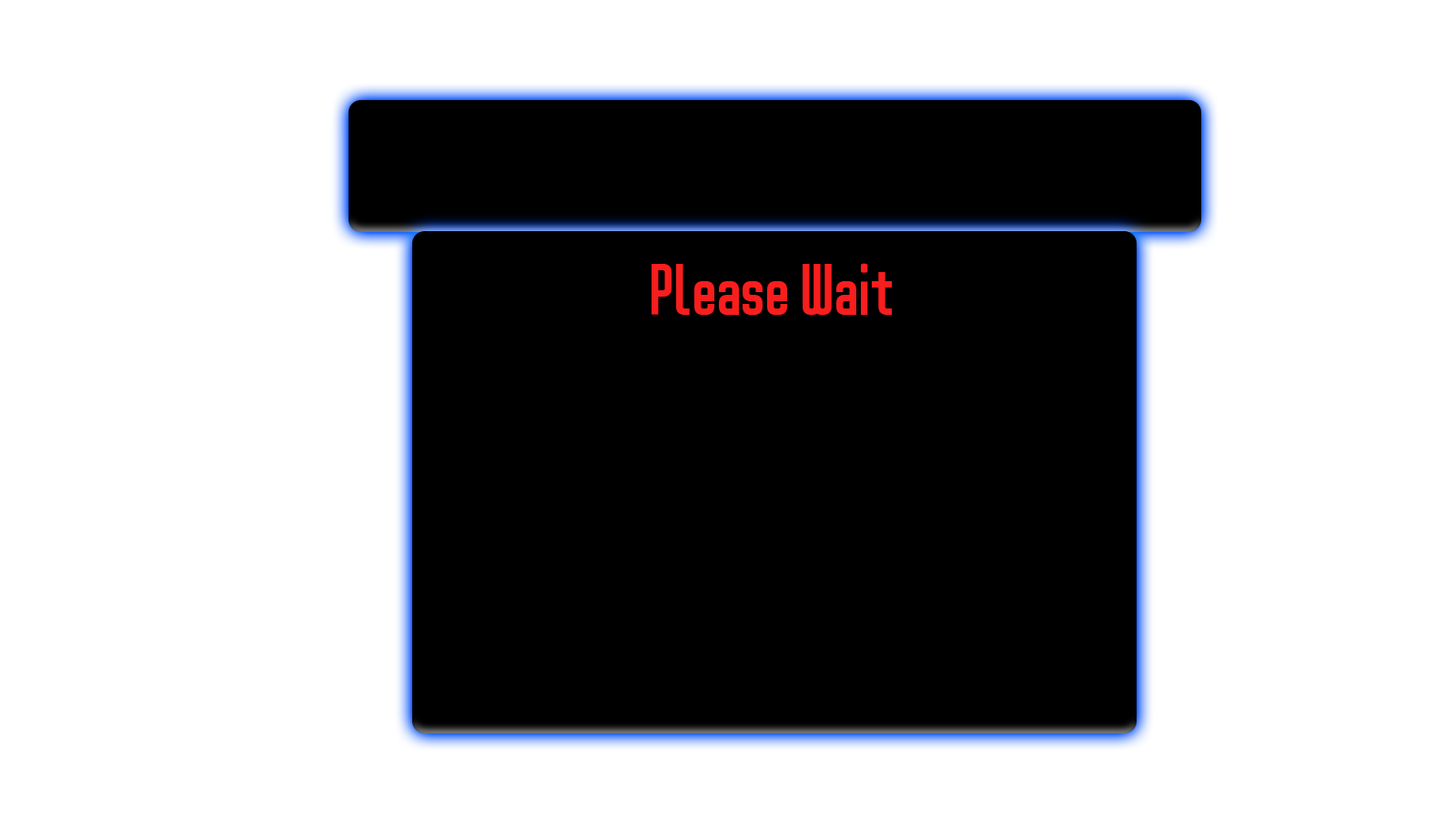
<style>
.page{position:relative;width:1456px;height:819px;background:#ffffff}
.page>*{position:absolute;margin:0}
.t1{font:56.9px "D3-Smartism-TypeA";color:#f81e1e}
</style>
<div class="page">
<p class="t1" style="left:652px;top:263px;width:240px;height:52px">Please Wait</p>
</div>
